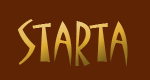
<style>
.page{position:relative;width:150px;height:80px;background:#5f2404}
.page>*{position:absolute;margin:0}
.t1{font:49.8px "MatisseITC-Regular"}
</style>
<div class="page">
<p class="t1" style="left:17px;top:19px;width:111px;height:48px">starta</p>
</div>
